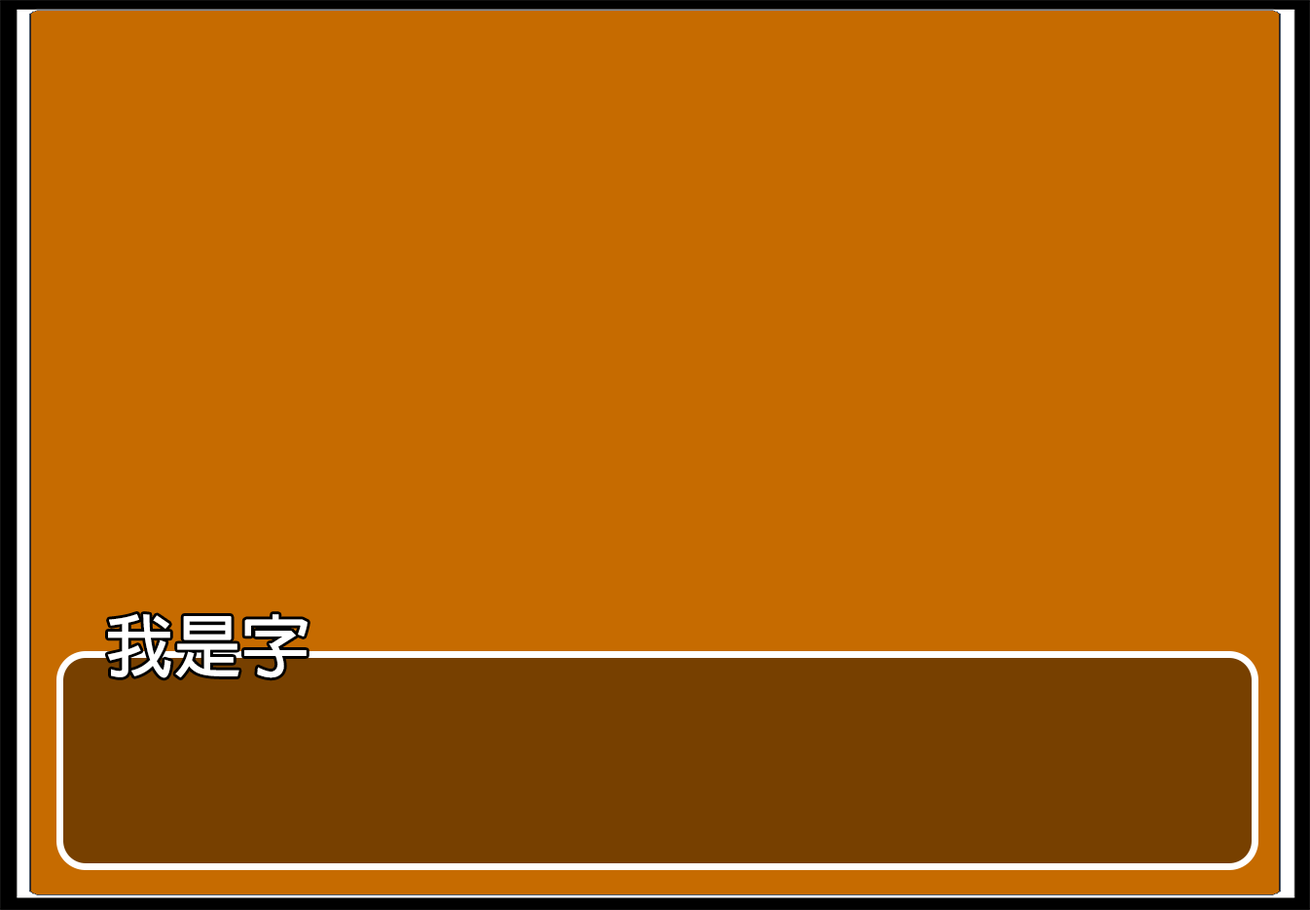
<style>
.page{position:relative;width:1310px;height:910px;background:#c66b00}
.page>*{position:absolute;margin:0}
.t1{font:68.1px "AdobeFanHeitiStd-Bold";color:#ffffff}
</style>
<div class="page">
<p class="t1" style="left:107px;top:614px;width:201px;height:64px">我是字</p>
</div>
